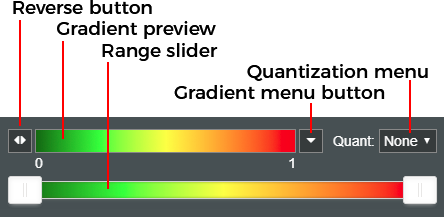
<style>
.page{position:relative;width:444px;height:217px;background:#ffffff}
.page>*{position:absolute;margin:0}
.t1{font:18.7px/21.3px "Montserrat-Regular";color:#000000}
</style>
<div class="page">
<p class="t1" style="left:13px;top:0px;width:415px;height:99px">Reverse button<br>        Gradient preview<br>                Range slider<br>                                          Quantization menu<br>                             Gradient menu button</p>
</div>
